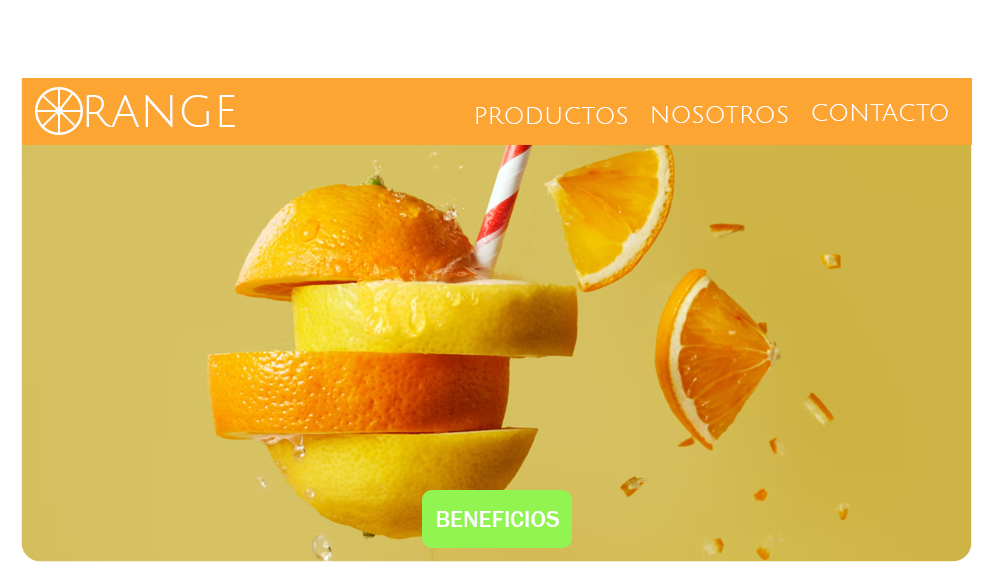
<style>
.page{position:relative;width:993px;height:583px;background:#ffffff}
.page>*{position:absolute;margin:0}
.t1{font:48px "JuliusSansOne-Regular";color:#ffffff}
.t2{font:24px "JuliusSansOne-Regular";color:#ffffff}
.t3{font:24px "FranklinGothic-Medium";color:#ffffff}
</style>
<div class="page">
<p class="t1" style="left:86px;top:95px;width:149px;height:32px">range</p>
<p class="t2" style="left:476px;top:107px;width:151px;height:17px">PRODUCTOS</p>
<p class="t2" style="left:652px;top:106px;width:136px;height:17px">NOSOTROS</p>
<p class="t2" style="left:812px;top:104px;width:136px;height:17px">CONTACTO</p>
<p class="t3" style="left:437px;top:511px;width:122px;height:16px">BENEFICIOS</p>
</div>
